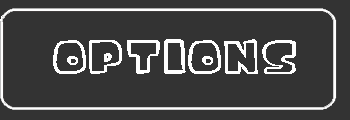
<style>
.page{position:relative;width:350px;height:120px;background:#333333}
.page>*{position:absolute;margin:0}
.t1{font:72px "iceagefont";color:#ffffff}
</style>
<div class="page">
<p class="t1" style="left:53px;top:39px;width:243px;height:35px">Options</p>
</div>
